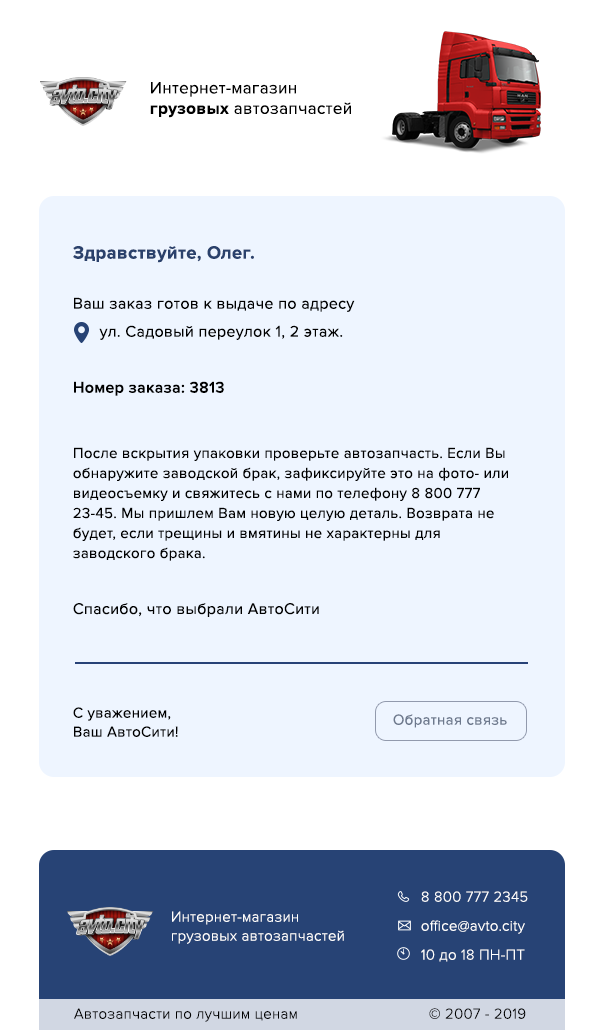
<style>
.page{position:relative;width:600px;height:1030px;background:#eef5ff}
.page>*{position:absolute;margin:0}
.t1{font:17px "ProximaNova-Regular";letter-spacing:0.02em;color:#000000}
.t2{font:17px "ProximaNova-Bold";letter-spacing:0.02em;color:#000000}
.t3{font:18.4px "ProximaNova-Bold";letter-spacing:0.02em;color:#2a416c}
.t4{font:16px/28px "ProximaNova-Regular";letter-spacing:0.02em;color:#000000}
.t5{font:16px/28px "ProximaNova-Semibold";letter-spacing:0.02em;color:#000000}
.t6{font:15px/20px "ProximaNova-Regular";letter-spacing:0.02em;color:#000000}
.t7{font:15px/19px "ProximaNova-Regular";letter-spacing:0.02em;color:#000000}
.t8{font:15px "ProximaNova-Regular";letter-spacing:0.02em;color:#6d798d}
.t9{font:15px/29px "ProximaNova-Light";letter-spacing:0.02em;color:#ffffff}
.t10{font:15px/19px "ProximaNova-Light";letter-spacing:0.02em;color:#ffffff}
.t11{font:15px "ProximaNova-Light";letter-spacing:0.02em;color:#000000}
</style>
<div class="page">
<p class="t1" style="left:150px;top:82px;width:201px;height:36px">Интернет-магазин<br><span class="t2">грузовых </span>автозапчастей</p>
<p class="t3" style="left:73px;top:246px;width:181px;height:17px">Здравствуйте, Олег.</p>
<p class="t4" style="left:74px;top:297px;width:281px;height:99px">Ваш заказ готов к выдаче по адресу <br>      ул. Садовый переулок 1, 2 этаж.<br><br><span class="t5">Номер заказа: 3813</span></p>
<p class="t6" style="left:73px;top:447px;width:435px;height:170px">После вскрытия упаковки проверьте автозапчасть. Если Вы обнаружите заводской брак, зафиксируйте это на фото- или видеосъемку и свяжитесь с нами по телефону 8 800 777 23-45. Мы пришлем Вам новую целую деталь. Возврата не будет, если трещины и вмятины не характерны для заводского брака.<br><span class="t4"><br>Спасибо, что выбрали АвтоСити</span></p>
<p class="t7" style="left:73px;top:707px;width:105px;height:30px">С уважением,<br>Ваш АвтоСити!</p>
<p class="t8" style="left:393px;top:714px;width:114px;height:14px">Обратная связь</p>
<p class="t9" style="left:421px;top:891px;width:107px;height:71px">8 800 777 2345<br>office@avto.city<br>10 до 18 ПН-ПТ</p>
<p class="t10" style="left:172px;top:911px;width:172px;height:33px">Интернет-магазин<br>грузовых автозапчастей</p>
<p class="t11" style="left:74px;top:1008px;width:223px;height:14px">Автозапчасти по лучшим ценам</p>
<p class="t11" style="left:429px;top:1008px;width:97px;height:11px">© 2007 - 2019</p>
</div>
